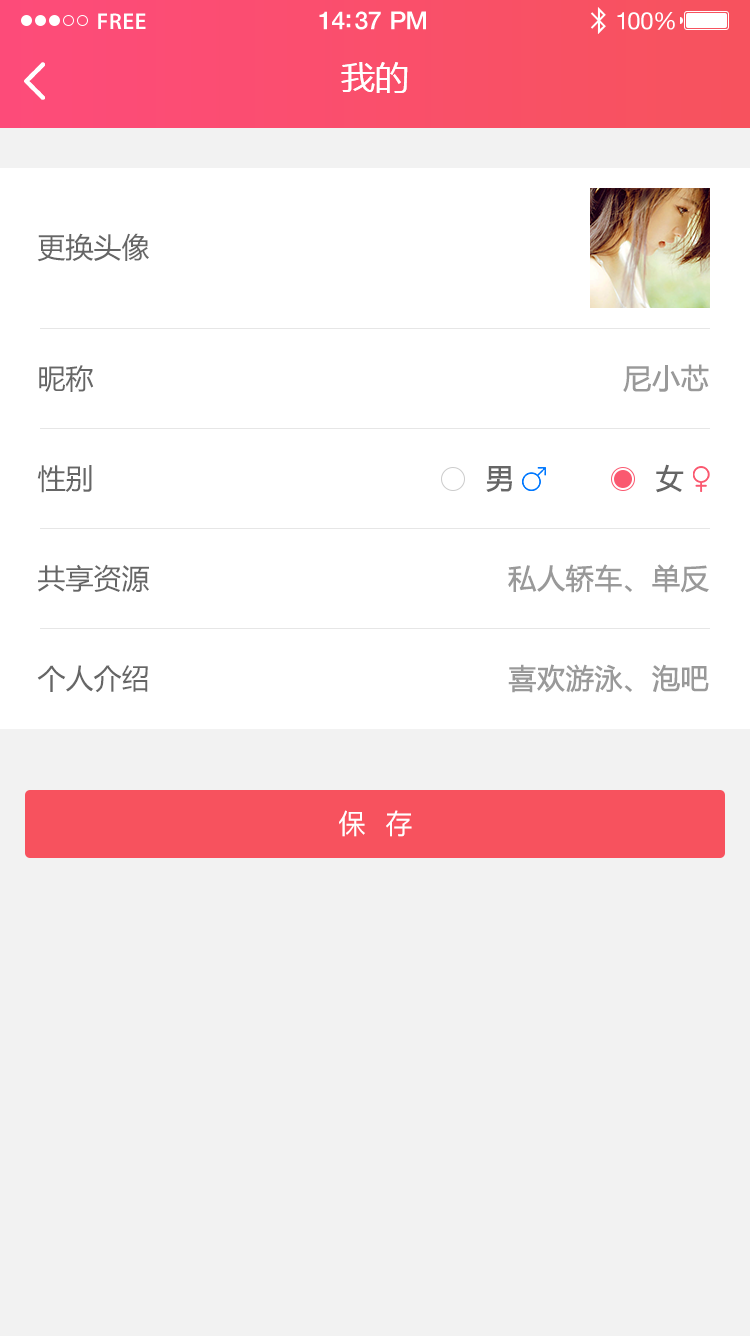
<style>
.page{position:relative;width:750px;height:1336px;background:#f2f2f2}
.page>*{position:absolute;margin:0}
.t1{font:23px "MyriadPro-Semibold";letter-spacing:0.02em;color:#ffffff}
.t2{font:25px "HelveticaNeue-Medium";letter-spacing:-0.02em;color:#ffffff}
.t3{font:24px "HelveticaNeue";letter-spacing:-0.02em;color:#ffffff}
.t4{font:34px "MicrosoftYaHei";color:#ffffff;text-transform:uppercase}
.t5{font:28px "MicrosoftYaHei";color:#666666}
.t6{font:28px "MicrosoftYaHei";color:#999999;font-weight:bold}
.t7{font:28px "MicrosoftYaHei";color:#666666;font-weight:bold}
.t8{font:28px "PingFang-SC-Medium";color:#ffffff;text-transform:uppercase}
</style>
<div class="page">
<p class="t1" style="left:98px;top:13px;width:48px;height:16px">FREE</p>
<p class="t2" style="left:319px;top:11px;width:107px;height:19px">14:37 PM</p>
<p class="t3" style="left:617px;top:12px;width:58px;height:18px">100%</p>
<p class="t4" style="left:341px;top:62px;width:67px;height:31px">我的</p>
<p class="t5" style="left:37px;top:233px;width:112px;height:29px">更换头像</p>
<p class="t5" style="left:39px;top:365px;width:55px;height:27px">昵称</p>
<p class="t6" style="left:623px;top:364px;width:86px;height:28px">尼小芯</p>
<p class="t5" style="left:37px;top:465px;width:55px;height:28px">性别</p>
<p class="t7" style="left:486px;top:466px;width:26px;height:26px">男</p>
<p class="t7" style="left:656px;top:464px;width:28px;height:29px">女</p>
<p class="t5" style="left:38px;top:564px;width:111px;height:28px">共享资源</p>
<p class="t6" style="left:508px;top:564px;width:201px;height:29px">私人轿车、单反</p>
<p class="t5" style="left:37px;top:665px;width:111px;height:28px">个人介绍</p>
<p class="t6" style="left:508px;top:664px;width:201px;height:29px">喜欢游泳、泡吧</p>
<p class="t8" style="left:339px;top:810px;width:73px;height:27px">保  存</p>
</div>
